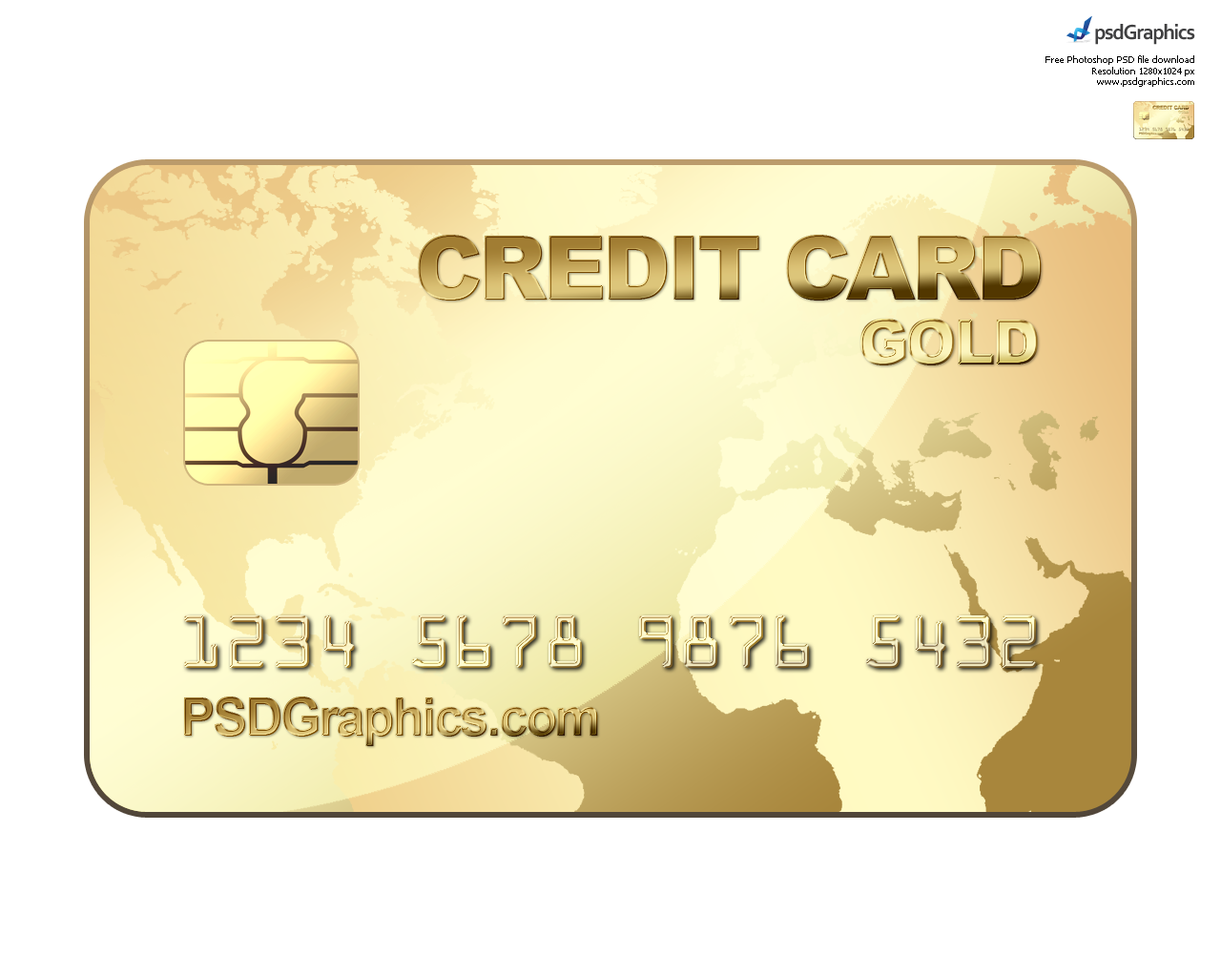
<style>
.page{position:relative;width:1221px;height:977px;background:#ffffff}
.page>*{position:absolute;margin:0}
.t1{font:9.3px "Tahoma";color:#000000}
.t2{font:88.7px "Arial-Black";letter-spacing:-0.05em}
.t3{font:52.5px "Arial-BoldMT";letter-spacing:-0.05em}
</style>
<div class="page">
<p class="t1" style="left:1045px;top:55px;width:149px;height:32px;text-align:right">Free Photoshop PSD file download<br>Resolution 1280x1024 px<br>www.psdgraphics.com</p>
<p class="t2" style="left:418px;top:235px;width:624px;height:65px">CREDIT CARD</p>
<p class="t3" style="left:184px;top:696px;width:414px;height:50px">PSDGraphics.com</p>
</div>
